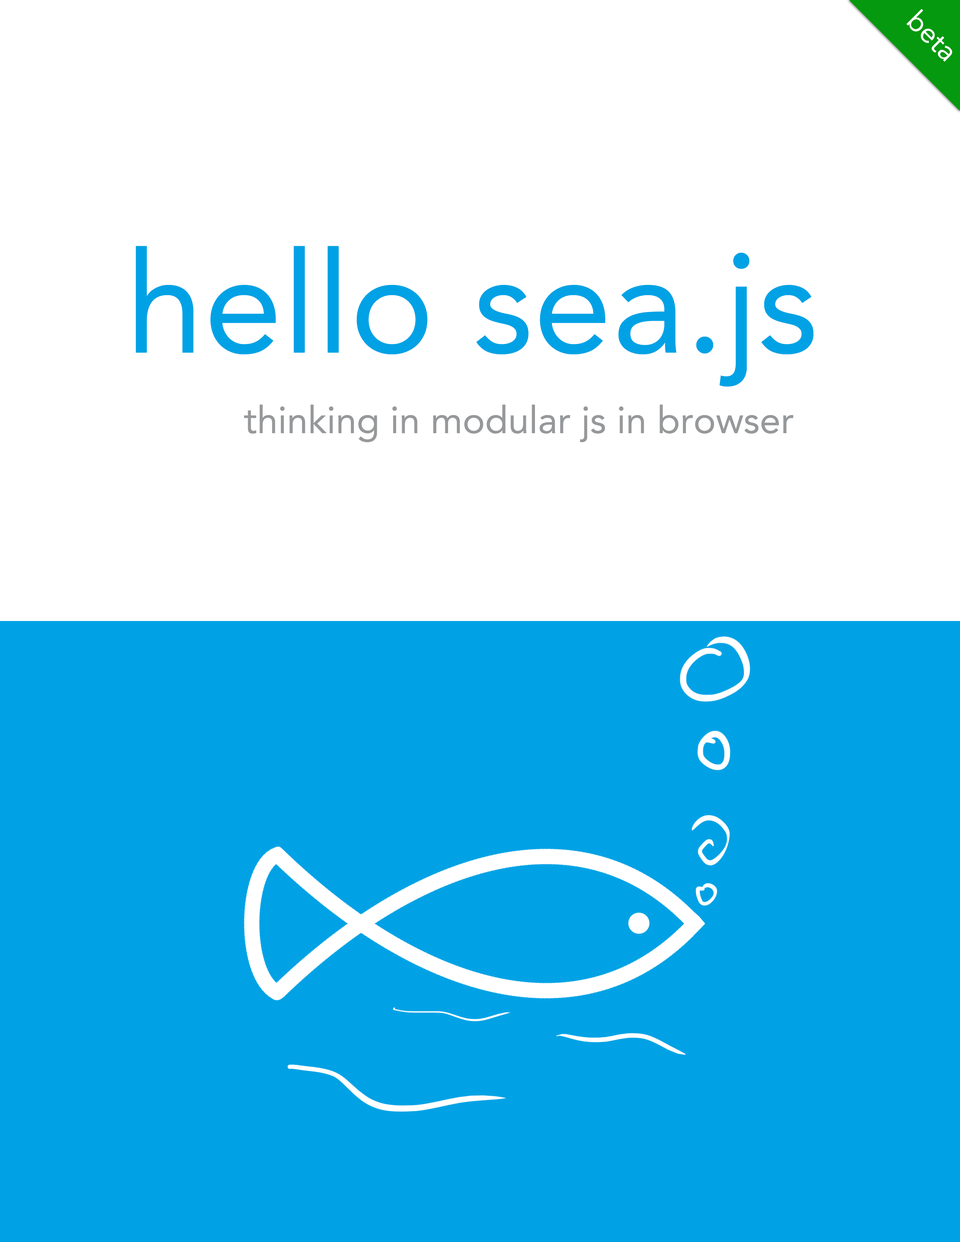
<style>
.page{position:relative;width:960px;height:1242px;background:#ffffff}
.page>*{position:absolute;margin:0}
.t1{font:28.2px "Avenir-Roman";color:#ffffff}
.t2{font:141.2px "Avenir-Roman";color:#00a2e5}
.t3{font:37.6px "Avenir-Roman";color:#96989a}
</style>
<div class="page">
<p class="t1" style="left:906px;top:9px;width:46px;height:53px;rotate:45deg">beta</p>
<p class="t2" style="left:136px;top:246px;width:677px;height:141px">hello sea.js</p>
<p class="t3" style="left:244px;top:405px;width:550px;height:37px">thinking in modular js in browser</p>
</div>
